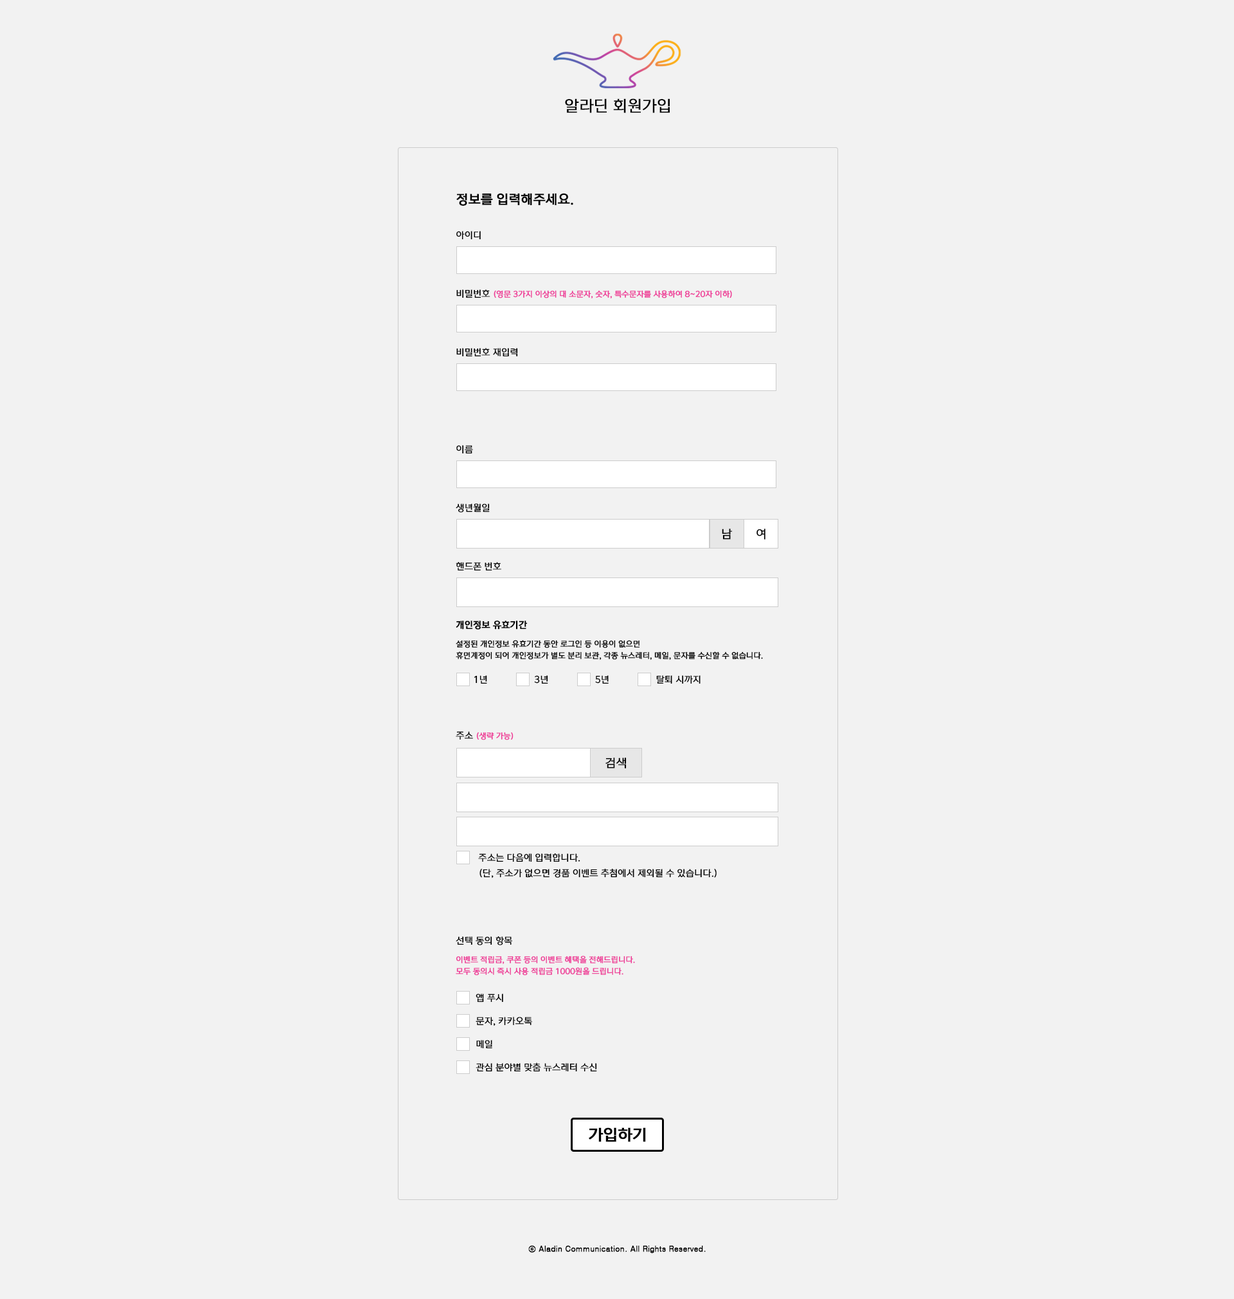
<style>
.page{position:relative;width:1234px;height:1299px;background:#f2f2f2}
.page>*{position:absolute;margin:0}
.t1{font:15.4px "ONEMobileRegular";color:#000000;font-weight:bold}
.t2{font:12.9px "ONEMobileBold";color:#000000;font-weight:bold}
.t3{font:9px "ONEMobileRegular";color:#000000;font-weight:bold}
.t4{font:7.7px "ONEMobileRegular";color:#ee3897;font-weight:bold}
.t5{font:11.6px "ONEMobileRegular";color:#000000;font-weight:bold}
.t6{font:7.7px/11.6px "ONEMobileRegular";color:#000000;font-weight:bold}
.t7{font:9px/19.3px "ONEMobileBold";color:#000000;font-weight:bold}
.t8{font:9px/15.4px "ONEMobileRegular";color:#000000;font-weight:bold}
.t9{font:7.7px/11.6px "ONEMobileRegular";color:#ee3897;font-weight:bold}
.t10{font:9px/19.3px "ONEMobileRegular";color:#000000;font-weight:bold}
.t11{font:15.4px "ONEMobileBold";color:#000000;font-weight:bold}
.t12{font:7.7px "Dotum";color:#000000;font-weight:bold}
</style>
<div class="page">
<p class="t1" style="left:565px;top:98px;width:105px;height:15px">알라딘 회원가입</p>
<p class="t2" style="left:456px;top:193px;width:117px;height:13px">정보를 입력해주세요.</p>
<p class="t3" style="left:456px;top:231px;width:25px;height:9px">아이디</p>
<p class="t4" style="left:456px;top:289px;width:276px;height:9px"><span class="t3">비밀번호 </span>(영문 3가지 이상의 대 소문자, 숫자, 특수문자를 사용하여 8~20자 이하)</p>
<p class="t3" style="left:456px;top:348px;width:62px;height:9px">비밀번호 재입력</p>
<p class="t3" style="left:456px;top:445px;width:17px;height:9px">이름</p>
<p class="t3" style="left:456px;top:503px;width:34px;height:9px">생년월일</p>
<p class="t5" style="left:722px;top:528px;width:10px;height:11px">남</p>
<p class="t5" style="left:757px;top:528px;width:9px;height:11px">여</p>
<p class="t3" style="left:456px;top:561px;width:45px;height:10px">핸드폰 번호</p>
<p class="t6" style="left:456px;top:620px;width:307px;height:40px"><span class="t7">개인정보 유효기간<br></span>설정된 개인정보 유효기간 동안 로그인 등 이용이 없으면<br>휴면계정이 되어 개인정보가 별도 분리 보관, 각종 뉴스레터, 메일, 문자를 수신할 수 없습니다.</p>
<p class="t3" style="left:474px;top:675px;width:227px;height:9px">1년                  3년                  5년                  탈퇴 시까지</p>
<p class="t4" style="left:456px;top:731px;width:58px;height:9px"><span class="t3">주소 </span>(생략 가능)</p>
<p class="t5" style="left:606px;top:757px;width:21px;height:11px">검색</p>
<p class="t8" style="left:478px;top:852px;width:239px;height:26px">주소는 다음에 입력합니다.<br>(단, 주소가 없으면 경품 이벤트 추첨에서 제외될 수 있습니다.)</p>
<p class="t9" style="left:456px;top:935px;width:179px;height:40px"><span class="t10">선택 동의 항목<br></span>이벤트 적립금, 쿠폰 등의 이벤트 혜택을 전해드립니다.<br>모두 동의시 즉시 사용 적립금 1000원을 드립니다.</p>
<p class="t3" style="left:476px;top:993px;width:27px;height:9px">앱 푸시</p>
<p class="t3" style="left:476px;top:1016px;width:56px;height:10px">문자, 카카오톡</p>
<p class="t3" style="left:476px;top:1040px;width:16px;height:8px">메일</p>
<p class="t3" style="left:476px;top:1062px;width:121px;height:10px">관심 분야별 맞춤 뉴스레터 수신</p>
<p class="t11" style="left:589px;top:1127px;width:57px;height:15px">가입하기</p>
<p class="t12" style="left:528px;top:1245px;width:178px;height:8px">ⓒ Aladin Communication. All Rights Reserved.</p>
</div>
